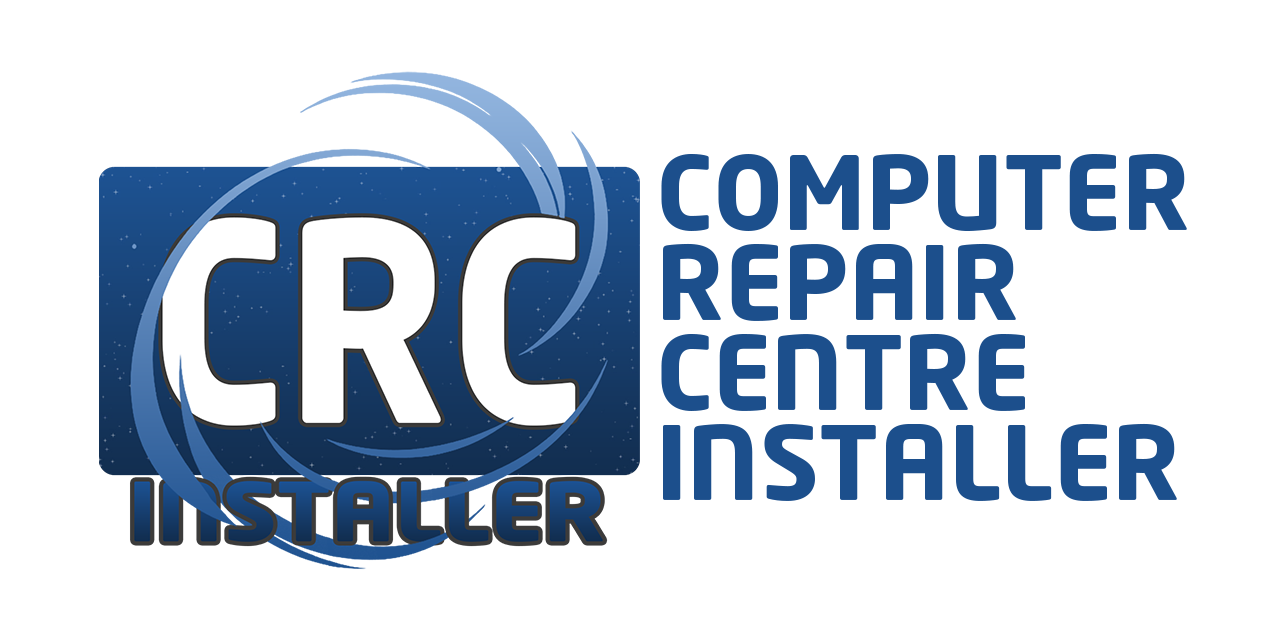
<style>
.page{position:relative;width:1280px;height:640px;background:#ffffff}
.page>*{position:absolute;margin:0}
.t1{font:101px/90px "NeoTech-Bold";color:#1c4f8c}
</style>
<div class="page">
<p class="t1" style="left:661px;top:153px;width:526px;height:348px">COMPUTER<br>REPAIR<br>CENTRE<br>INSTALLER</p>
</div>
